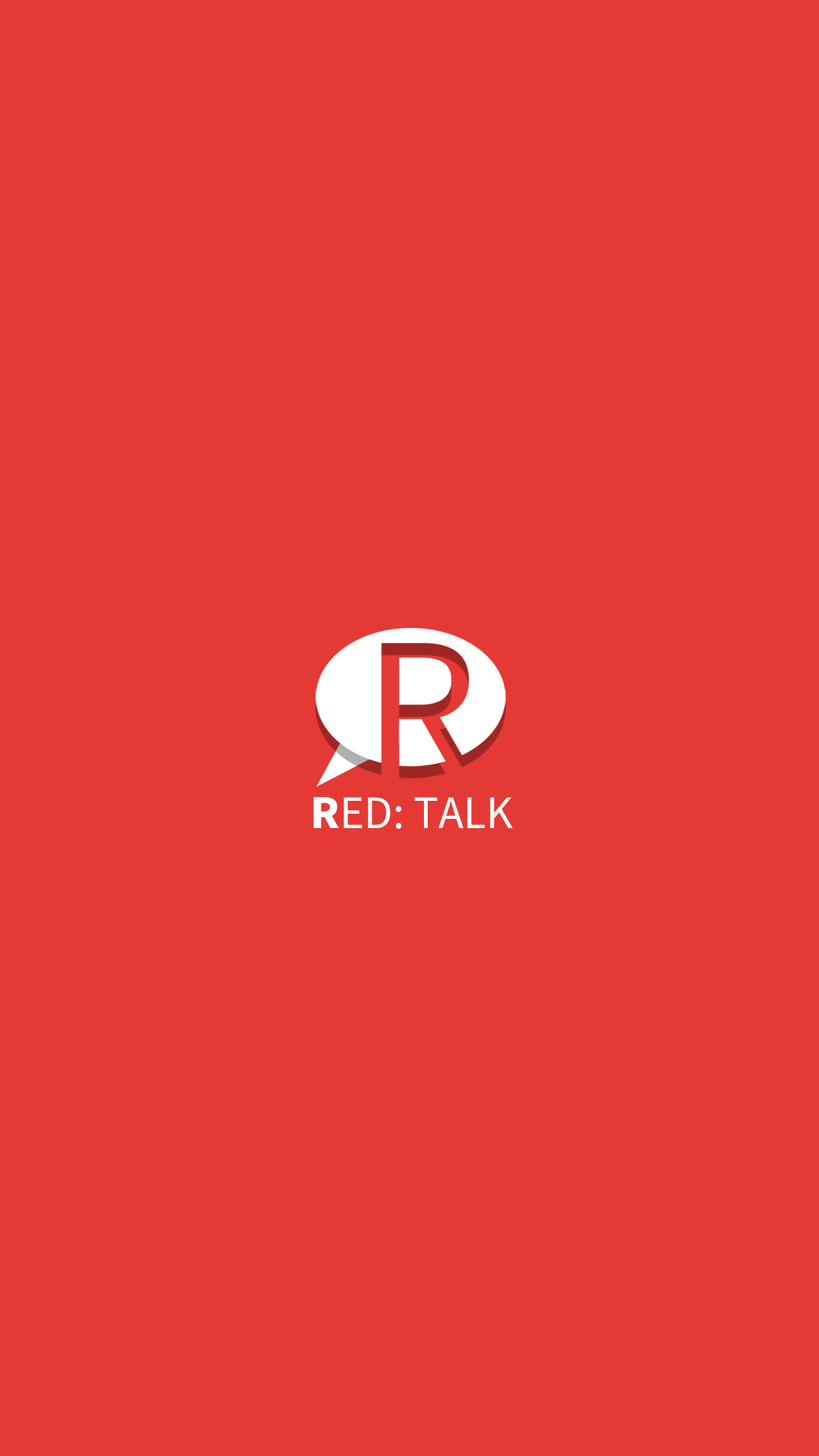
<style>
.page{position:relative;width:819px;height:1456px;background:#e53935}
.page>*{position:absolute;margin:0}
.t1{font:41.6px "NotoSansCJKkr-Regular";color:#ffffff}
.t2{font:41.6px "NotoSansCJKkr-Black";color:#ffffff}
</style>
<div class="page">
<p class="t1" style="left:313px;top:797px;width:200px;height:32px"><span class="t2">R</span>ED: TALK</p>
</div>
